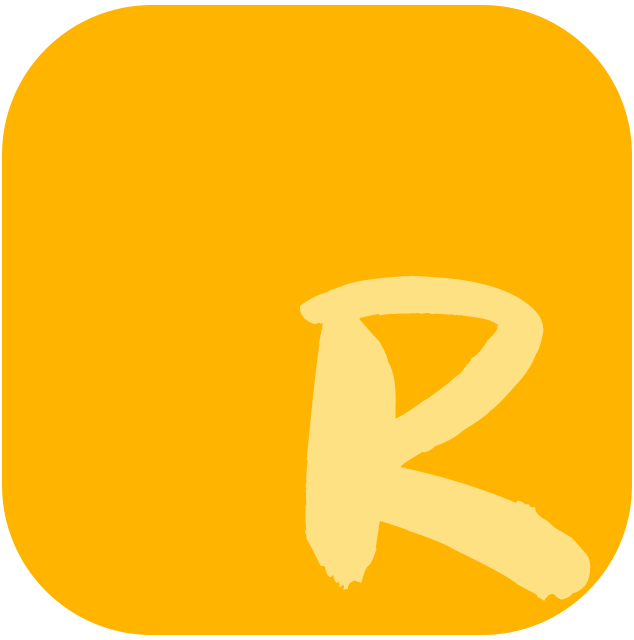
<style>
.page{position:relative;width:634px;height:640px;background:#ffb400}
.page>*{position:absolute;margin:0}
.t1{font:559.7px "REEJI-CHAO-ShiguangGB-Regular";color:#fee183}
</style>
<div class="page">
<p class="t1" style="left:300px;top:275px;width:291px;height:326px">R</p>
</div>
